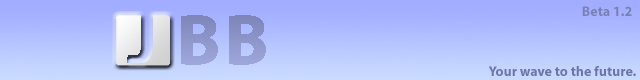
<style>
.page{position:relative;width:640px;height:80px}
.page>*{position:absolute;margin:0}
.t1{font:13.9px "Myriad-Bold";color:#7981b4}
.t2{font:13.9px "Myriad-Bold";color:#6d74a8}
</style>
<div class="page">
<p class="t1" style="left:582px;top:6px;width:50px;height:10px">Beta 1.2</p>
<p class="t2" style="left:488px;top:66px;width:148px;height:10px">Your wave to the future.</p>
</div>
